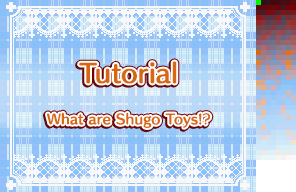
<style>
.page{position:relative;width:296px;height:192px}
.page>*{position:absolute;margin:0}
.t1{font:24px "HummingStd-B";letter-spacing:0.02em;color:#d86810}
.t2{font:13px "HummingStd-B";letter-spacing:0.02em;color:#d86810}
.t3{font:13px "HummingStd-D";letter-spacing:0.02em;color:#d86810}
</style>
<div class="page">
<p class="t1" style="left:79px;top:61px;width:98px;height:23px">Tutorial</p>
<p class="t2" style="left:47px;top:112px;width:164px;height:16px">What are Shugo Toys!<span class="t3">?</span></p>
</div>
